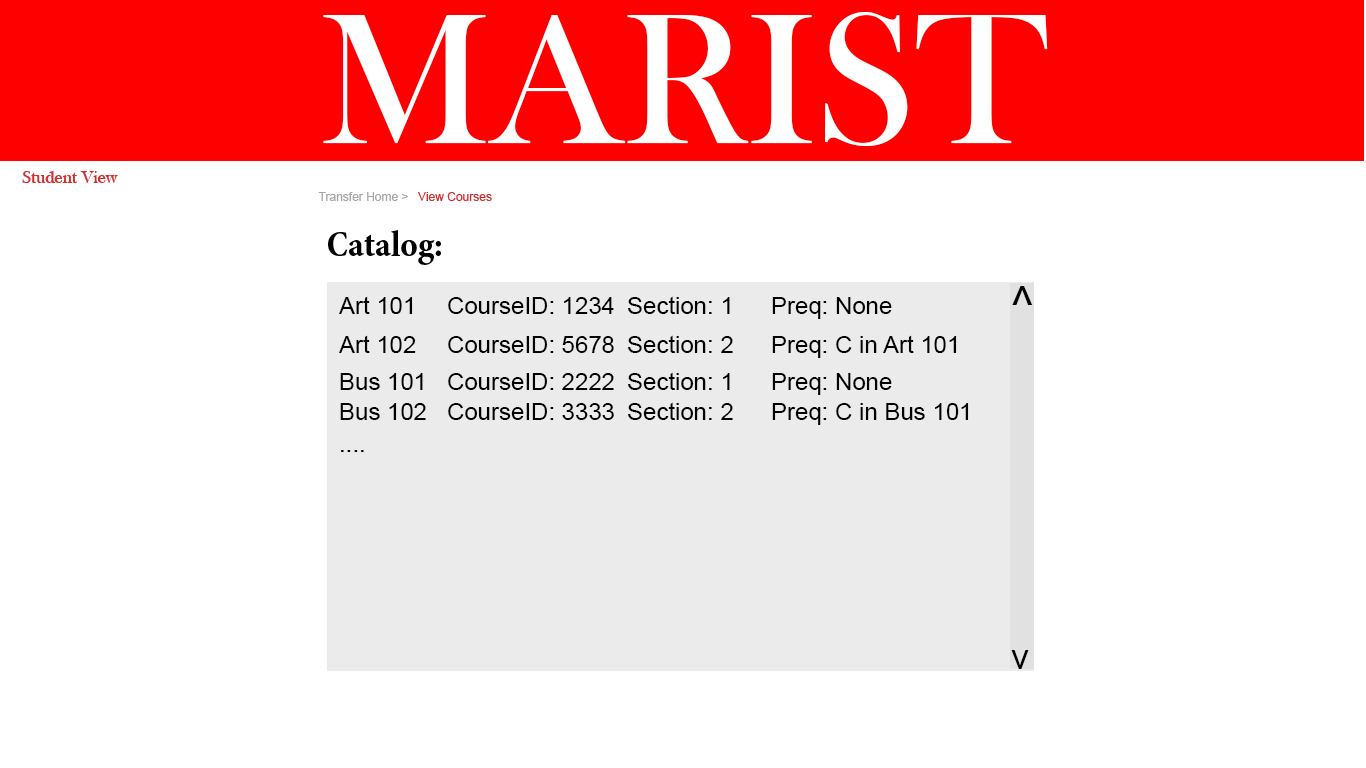
<style>
.page{position:relative;width:1366px;height:768px;background:#ffffff}
.page>*{position:absolute;margin:0}
.t1{font:192px "BaskOldFace";color:#ffffff}
.t2{font:18px "BaskOldFace";color:#d02f2f}
.t3{font:12px "ArialMT";color:#a9a4a4}
.t4{font:12px "ArialMT";color:#d02f2f}
.t5{font:36px "MinionPro-BoldCn";color:#000000}
.t6{font:48px "ArialMT";color:#000000}
.t7{font:24px "ArialMT";color:#000000}
.t8{font:36px "ArialMT";color:#000000}
</style>
<div class="page">
<p class="t1" style="left:323px;top:12px;width:725px;height:134px">MARIST</p>
<p class="t2" style="left:22px;top:171px;width:96px;height:12px">Student View</p>
<p class="t3" style="left:318px;top:192px;width:90px;height:9px">Transfer Home &gt;</p>
<p class="t4" style="left:418px;top:192px;width:74px;height:9px">View Courses</p>
<p class="t5" style="left:328px;top:230px;width:113px;height:35px">Catalog:</p>
<p class="t6" style="left:1012px;top:286px;width:21px;height:19px">^</p>
<p class="t7" style="left:339px;top:296px;width:553px;height:23px">Art 101 CourseID: 1234 Section: 1  Preq: None</p>
<p class="t7" style="left:339px;top:335px;width:618px;height:23px">Art 102 CourseID: 5678 Section: 2  Preq: C in Art 101</p>
<p class="t7" style="left:340px;top:372px;width:552px;height:23px">Bus 101 CourseID: 2222 Section: 1  Preq: None</p>
<p class="t7" style="left:340px;top:402px;width:629px;height:23px">Bus 102 CourseID: 3333 Section: 2  Preq: C in Bus 101</p>
<p class="t7" style="left:341px;top:450px;width:23px;height:2px">....</p>
<p class="t8" style="left:1011px;top:650px;width:18px;height:19px">v</p>
</div>
